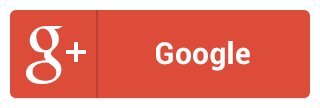
<style>
.page{position:relative;width:320px;height:108px;background:#dd4b39}
.page>*{position:absolute;margin:0}
.t1{font:30px "Roboto-Bold";letter-spacing:0.01em;color:#ffffff}
</style>
<div class="page">
<p class="t1" style="left:156px;top:41px;width:94px;height:30px">Google</p>
</div>
